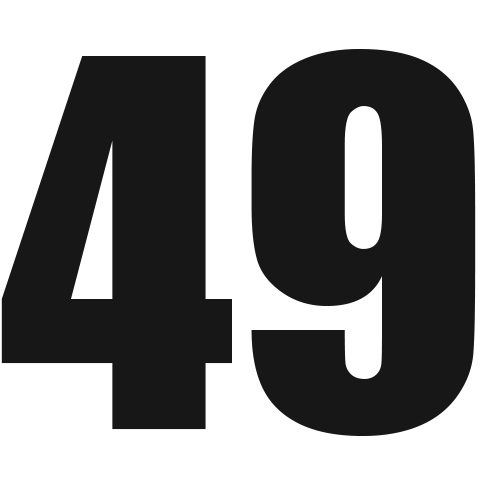
<style>
.page{position:relative;width:480px;height:480px;background:#171717}
.page>*{position:absolute;margin:0}
.t1{font:472.3px "Impact";color:#171717}
</style>
<div class="page">
<p class="t1" style="left:1px;top:49px;width:475px;height:387px">49</p>
</div>
